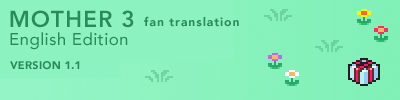
<style>
.page{position:relative;width:400px;height:100px;background:#8cf2bf}
.page>*{position:absolute;margin:0}
.t1{font:23px "Avenir-Heavy";letter-spacing:0.04em;color:#288c5a}
.t2{font:12px "Avenir-Black";letter-spacing:0.08em;color:#288c5a}
.t3{font:17px "Avenir-Medium";letter-spacing:0.02em;color:#288c5a}
.t4{font:11px "Avenir-Black";letter-spacing:0.02em;color:#288c5a}
</style>
<div class="page">
<p class="t1" style="left:10px;top:10px;width:124px;height:18px">MOTHER 3</p>
<p class="t2" style="left:144px;top:16px;width:95px;height:11px">fan translation</p>
<p class="t3" style="left:10px;top:32px;width:118px;height:18px">English Edition</p>
<p class="t4" style="left:10px;top:61px;width:70px;height:9px">VERSION 1.1</p>
</div>
